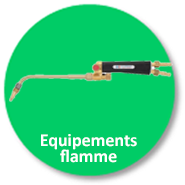
<style>
.page{position:relative;width:185px;height:185px;background:#00cc66}
.page>*{position:absolute;margin:0}
.t1{font:18px/16px "Calibri-Bold";color:#ffffff}
</style>
<div class="page">
<p class="t1" style="left:41px;top:134px;width:96px;height:29px;text-align:center">Equipements<br>flamme</p>
</div>
